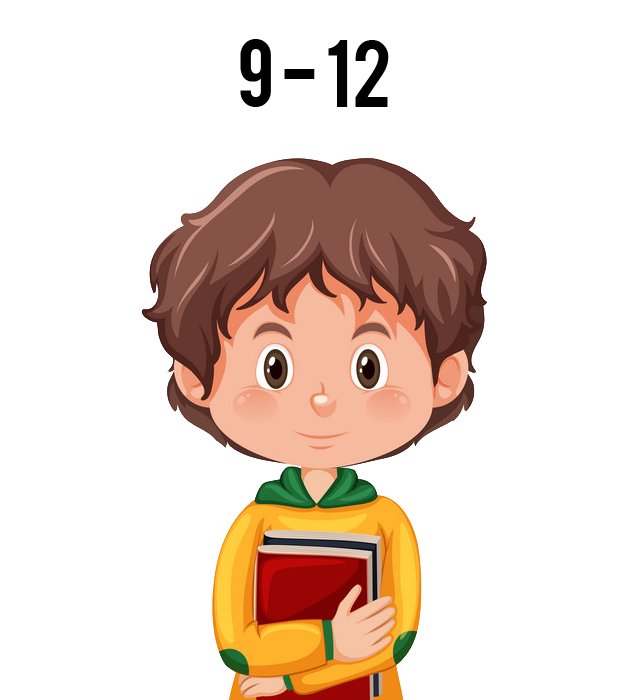
<style>
.page{position:relative;width:619px;height:700px;background:#ffffff}
.page>*{position:absolute;margin:0}
.t1{font:75px "Bebas";color:#000000}
</style>
<div class="page">
<p class="t1" style="left:240px;top:39px;width:149px;height:68px">9 - 12</p>
</div>
